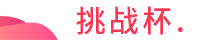
<style>
.page{position:relative;width:200px;height:40px;background:#ffffff}
.page>*{position:absolute;margin:0}
.t1{font:30.3px "NotoSansCJKsc-Medium";letter-spacing:0.1em;color:#f63854}
</style>
<div class="page">
<p class="t1" style="left:76px;top:6px;width:107px;height:29px">挑战杯.</p>
</div>
